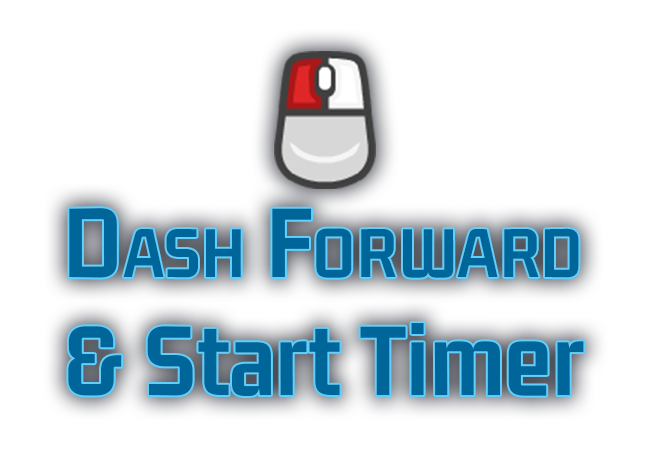
<style>
.page{position:relative;width:650px;height:450px;background:#ffffff}
.page>*{position:absolute;margin:0}
.t1{font:107.5px "GemunuLibre-Bold";color:#006699;font-variant:small-caps;font-weight:bold}
.t2{font:107.5px "GemunuLibre-Bold";color:#006699;font-weight:bold}
</style>
<div class="page">
<p class="t1" style="left:69px;top:208px;width:510px;height:70px">Dash Forward</p>
<p class="t2" style="left:68px;top:323px;width:516px;height:73px">&amp; Start Timer</p>
</div>
